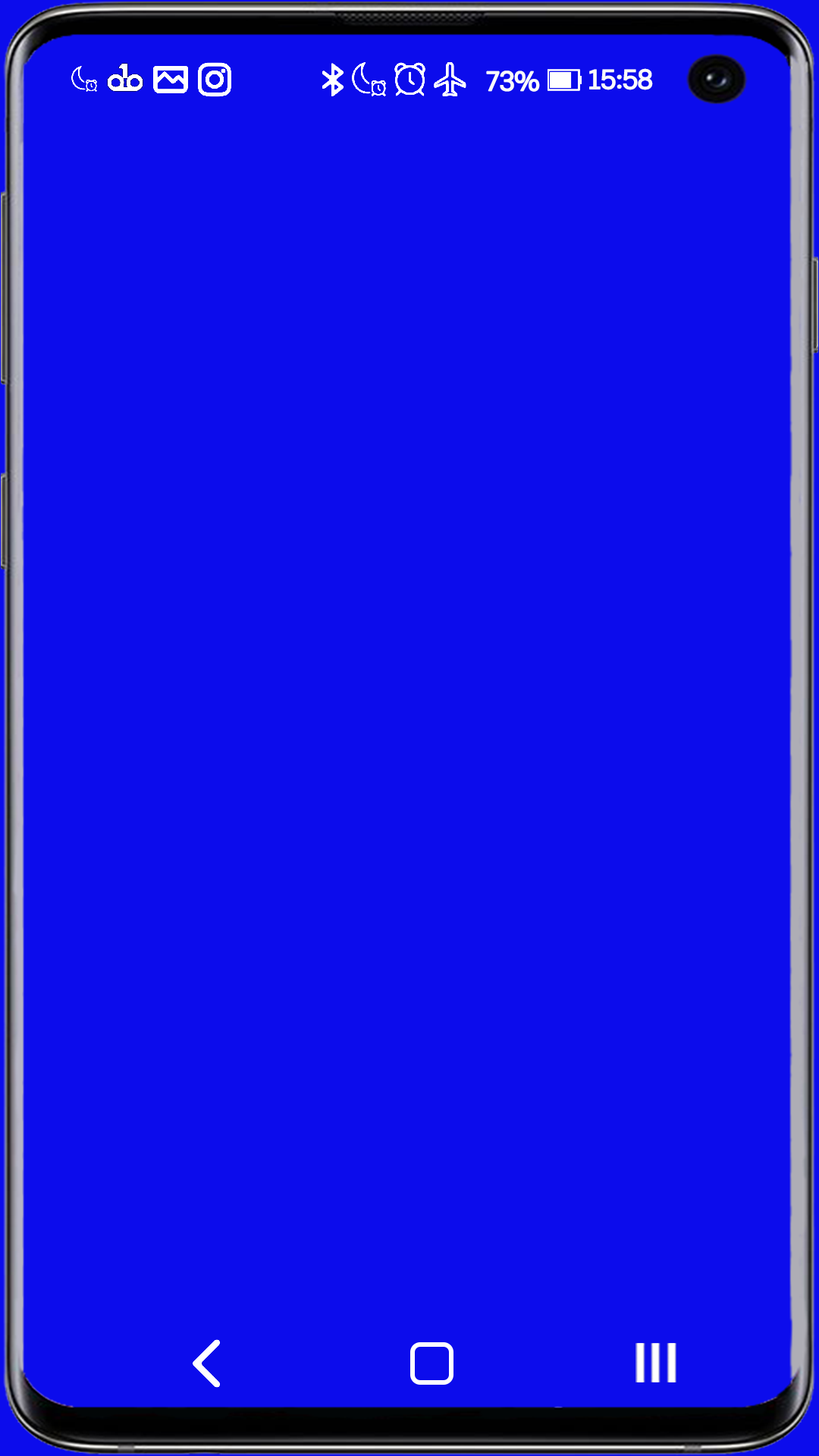
<style>
.page{position:relative;width:819px;height:1456px;background:#0c0cec}
.page>*{position:absolute;margin:0}
.t1{font:48.7px "KommonGrotesk-Regular";letter-spacing:-0.08em;color:#fafafa;font-weight:bold}
</style>
<div class="page">
<p class="t1" style="left:486px;top:71px;width:54px;height:21px">73%</p>
<p class="t1" style="left:589px;top:68px;width:64px;height:22px">15:58</p>
</div>
